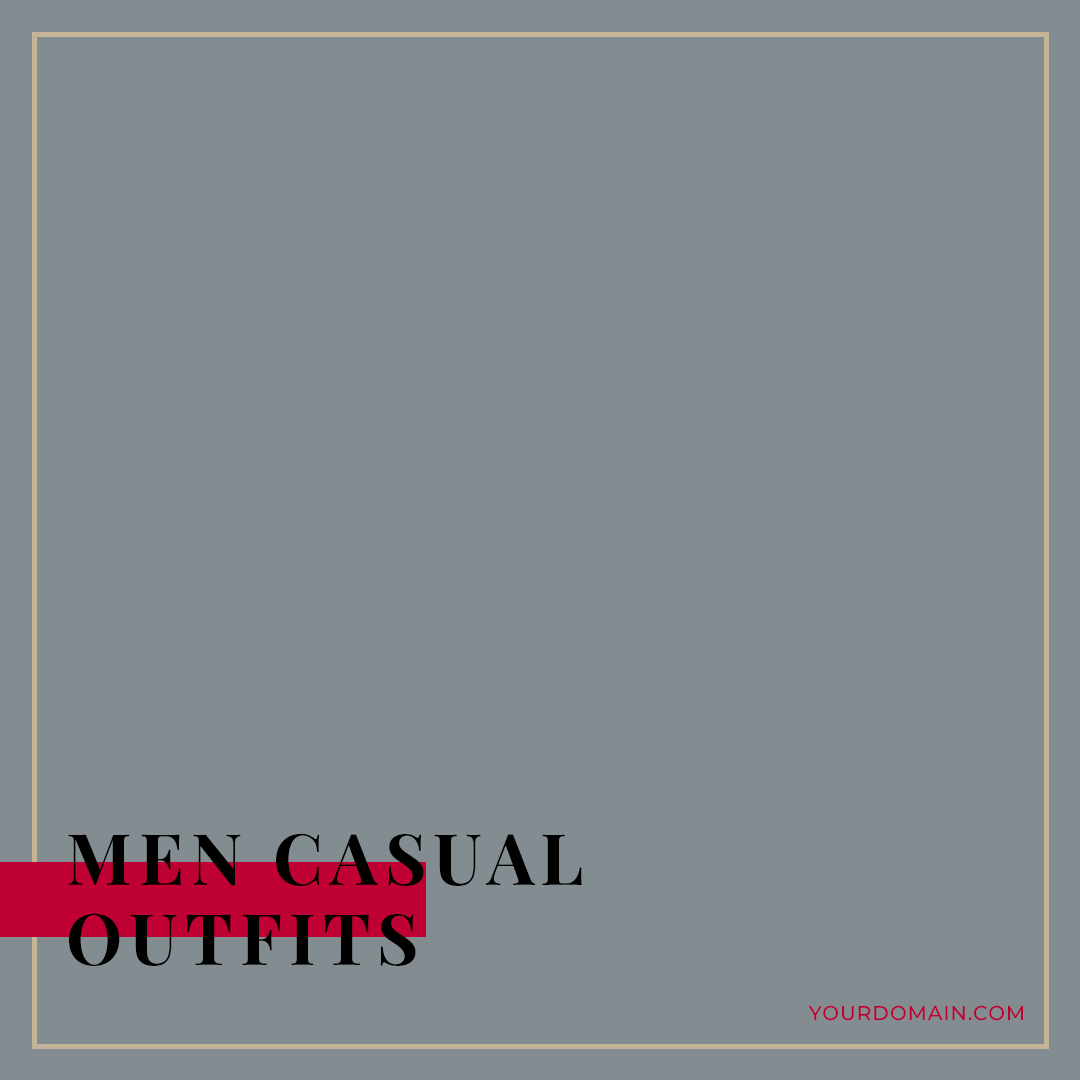
<style>
.page{position:relative;width:1080px;height:1080px;background:#838c91}
.page>*{position:absolute;margin:0}
.t1{font:71px/79.9px "PlayfairDisplay-Bold";letter-spacing:0.1em;color:#000000;text-transform:uppercase}
.t2{font:20px "Montserrat-Medium";letter-spacing:0.05em;color:#bf0033;text-transform:uppercase}
</style>
<div class="page">
<p class="t1" style="left:68px;top:833px;width:514px;height:133px">men casual <br>outfits</p>
<p class="t2" style="left:808px;top:1005px;width:215px;height:16px">Yourdomain.com</p>
</div>
